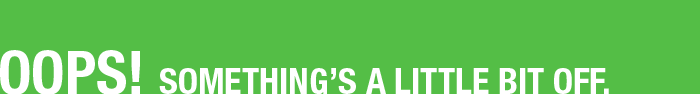
<style>
.page{position:relative;width:700px;height:94px;background:#54be46}
.page>*{position:absolute;margin:0}
.t1{font:36px "HelveticaNeueLTPro-BdCn";color:#ffffff}
.t2{font:60px "HelveticaNeueLTPro-BdCn";color:#ffffff}
</style>
<div class="page">
<p class="t1" style="left:0px;top:50px;width:609px;height:45px"><span class="t2">OOPS! </span>SOMETHING’S A LITTLE BIT OFF.</p>
</div>
